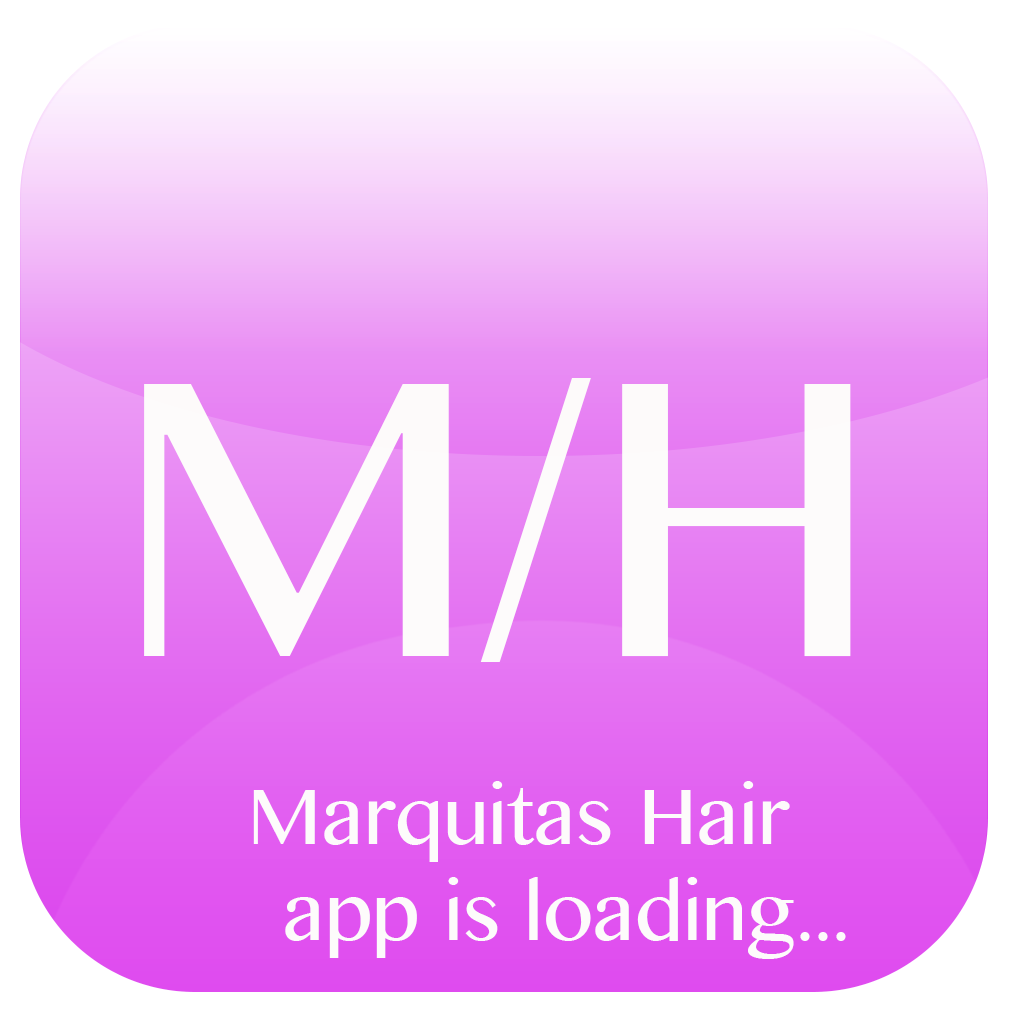
<style>
.page{position:relative;width:1024px;height:1024px}
.page>*{position:absolute;margin:0}
.t1{font:400px "OriyaMN";color:#fdfbfb}
.t2{font:80px "OriyaMN";color:#fdfbfb}
</style>
<div class="page">
<p class="t1" style="left:144px;top:378px;width:707px;height:284px">M/HH</p>
<p class="t2" style="left:253px;top:781px;width:593px;height:178px">Marquitas Hair<br> app is loading...</p>
</div>
